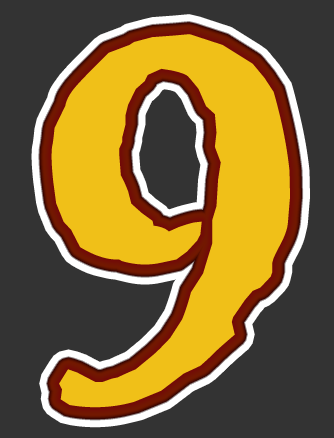
<style>
.page{position:relative;width:334px;height:438px;background:#333333}
.page>*{position:absolute;margin:0}
.t1{font:550px "PiecesofEight";letter-spacing:0.18em;color:#f0c018}
</style>
<div class="page">
<p class="t1" style="left:51px;top:34px;width:239px;height:374px">9</p>
</div>
